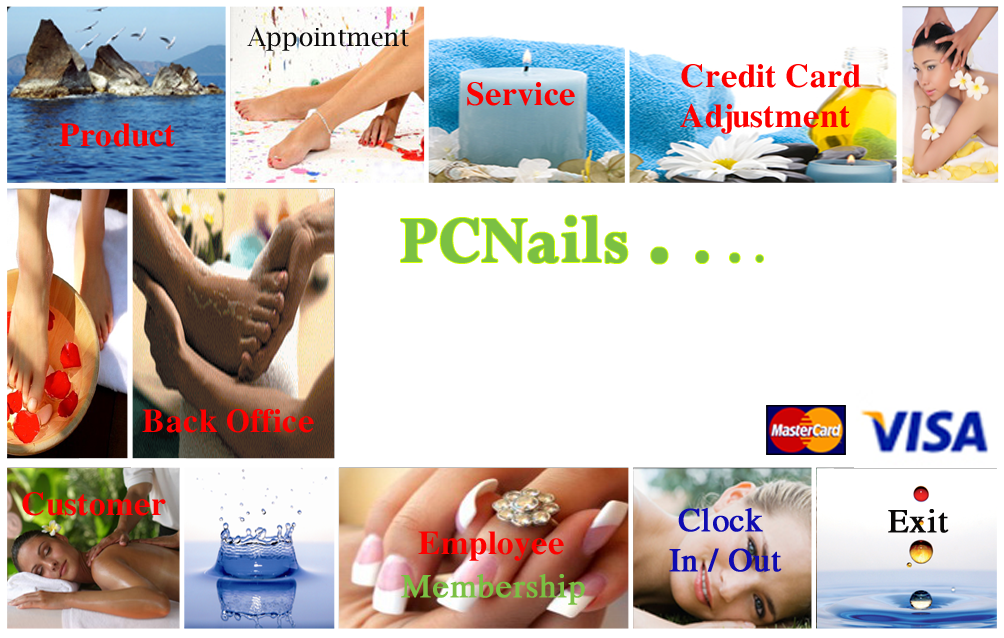
<style>
.page{position:relative;width:1004px;height:638px;background:#ffffff}
.page>*{position:absolute;margin:0}
.t1{font:25px "LucidaBright";color:#0c0b0b}
.t2{font:33.3px "VNI-Times-Bold";color:#fd0000}
.t3{font:72px "Perpetua-Bold";color:#7bc043;font-weight:bold;scale:0.93 1}
.t4{font:100px "Perpetua-Bold";color:#7bc043;font-weight:bold;scale:0.93 1}
.t5{font:75px "Perpetua-Bold";color:#7bc043;font-weight:bold;scale:0.93 1}
.t6{font:58.3px "Perpetua-Bold";color:#7bc043;font-weight:bold;scale:0.93 1}
.t7{font:41.7px "Perpetua-Bold";color:#7bc043;font-weight:bold;scale:0.93 1}
.t8{font:33.3px "VNI-Times";color:#0f0bb1;font-weight:bold}
.t9{font:33.3px "VNI-Times";color:#c04349;font-weight:bold}
.t10{font:33.3px "VNI-Times";color:#0a0909;font-weight:bold}
.t11{font:33.3px "VNI-Times";color:#7bc043;font-weight:bold}
</style>
<div class="page">
<p class="t1" style="left:247px;top:27px;width:162px;height:24px">Appointment</p>
<p class="t2" style="left:680px;top:64px;width:181px;height:70px">Credit Card Adjustment</p>
<p class="t2" style="left:467px;top:82px;width:108px;height:24px">Service</p>
<p class="t2" style="left:59px;top:123px;width:116px;height:24px">Product</p>
<p class="t3" style="left:401px;top:215px;width:362px;height:49px">PCNails <span class="t4">. </span><span class="t5">. </span><span class="t6">. </span><span class="t7">.</span></p>
<p class="t2" style="left:142px;top:409px;width:172px;height:24px">Back Office</p>
<p class="t2" style="left:22px;top:492px;width:144px;height:24px">Customer</p>
<p class="t8" style="left:669px;top:508px;width:113px;height:64px"><span class="t9"> </span> Clock<br> In / Out</p>
<p class="t10" style="left:888px;top:509px;width:61px;height:24px">Exit</p>
<p class="t2" style="left:418px;top:531px;width:146px;height:30px">Employee</p>
<p class="t11" style="left:401px;top:574px;width:184px;height:31px">Membership</p>
</div>
